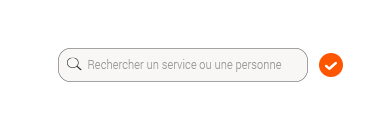
<style>
.page{position:relative;width:388px;height:138px;background:#ffffff}
.page>*{position:absolute;margin:0}
.t1{font:11.5px "Roboto-Light";color:#9e9d9d}
</style>
<div class="page">
<p class="t1" style="left:88px;top:59px;width:194px;height:13px">Rechercher un service ou une personne</p>
</div>
